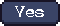
<style>
.page{position:relative;width:60px;height:26px;background:#3a4466}
.page>*{position:absolute;margin:0}
.t1{font:16.5px "OfMiceAndCats";color:#ffffff}
</style>
<div class="page">
<p class="t1" style="left:15px;top:6px;width:29px;height:11px">Yes</p>
</div>
